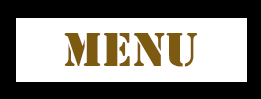
<style>
.page{position:relative;width:261px;height:99px;background:#ffffff}
.page>*{position:absolute;margin:0}
.t1{font:50px "Stencil";color:#7e5910}
</style>
<div class="page">
<p class="t1" style="left:64px;top:33px;width:134px;height:34px">MENU</p>
</div>
